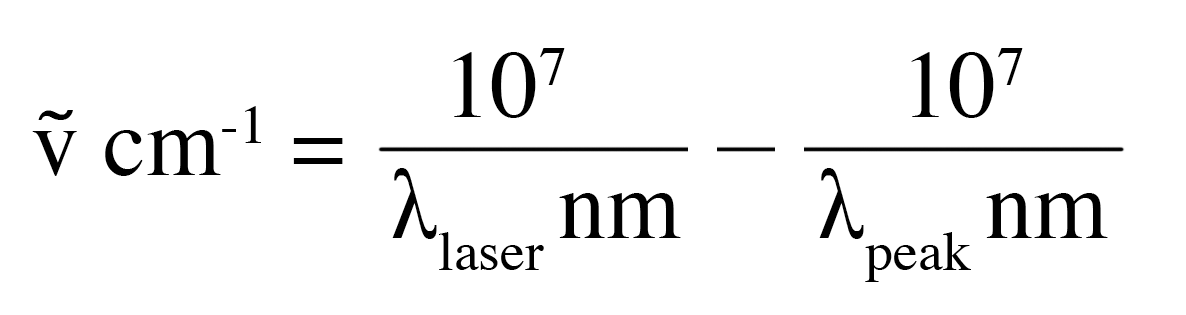
<style>
.page{position:relative;width:1186px;height:315px;background:#ffffff}
.page>*{position:absolute;margin:0}
.t1{font:96px "Times-Roman";color:#000000}
</style>
<div class="page">
<p class="t1" style="left:453px;top:48px;width:112px;height:70px">107</p>
<p class="t1" style="left:911px;top:48px;width:112px;height:70px">107</p>
<p class="t1" style="left:32px;top:106px;width:311px;height:70px">ṽ cm-1 =</p>
<p class="t1" style="left:392px;top:168px;width:289px;height:102px">λlaser nm</p>
<p class="t1" style="left:819px;top:168px;width:289px;height:114px">λpeak nm</p>
</div>
